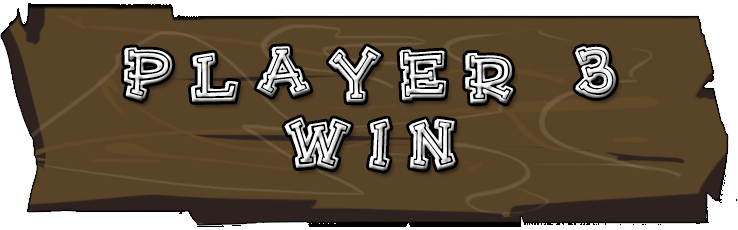
<style>
.page{position:relative;width:738px;height:230px;background:#594427}
.page>*{position:absolute;margin:0}
.t1{font:72px/14px "HeeHaw-Regular";letter-spacing:0.2em;color:#ffffff}
</style>
<div class="page">
<p class="t1" style="left:124px;top:46px;width:492px;height:125px;text-align:center">Player 3<br><br><br><br><br>Win</p>
</div>
